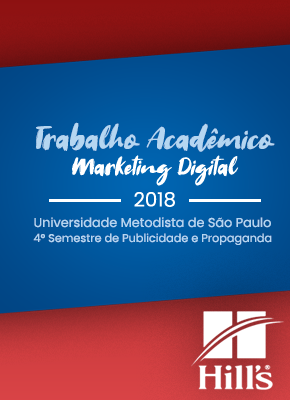
<style>
.page{position:relative;width:290px;height:400px}
.page>*{position:absolute;margin:0}
.t1{font:30.3px "Welcome-2019";color:#b5d6f1;font-style:italic}
.t2{font:23.5px "Welcome-2019";color:#ffffff;font-style:italic}
.t3{font:19.6px "Poppins-Regular";color:#ffffff}
.t4{font:12.8px "Poppins-Regular";color:#b5d6f1}
.t5{font:11.2px "Poppins-Regular";color:#b5d6f1}
</style>
<div class="page">
<p class="t1" style="left:36px;top:122px;width:239px;height:30px">Trabalho Acadêmico</p>
<p class="t2" style="left:72px;top:155px;width:167px;height:31px">Marketing Digital</p>
<p class="t3" style="left:134px;top:192px;width:41px;height:15px">2018</p>
<p class="t4" style="left:34px;top:217px;width:237px;height:11px">Universidade Metodista de São Paulo</p>
<p class="t5" style="left:33px;top:233px;width:239px;height:12px">4° Semestre de Publicidade e Propaganda</p>
</div>
